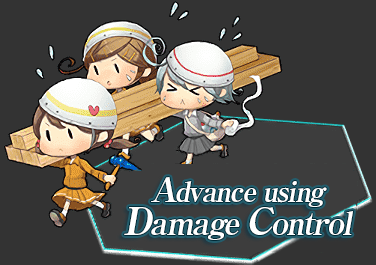
<style>
.page{position:relative;width:376px;height:265px;background:#333333}
.page>*{position:absolute;margin:0}
.t1{font:28px/30px "RyuminPro-ExBold";letter-spacing:-0.06em;color:#ffffff;font-style:italic}
.t2{font:34px/30px "RyuminPro-ExBold";letter-spacing:-0.06em;color:#ffffff;font-style:italic}
.t3{font:38px/30px "RyuminPro-ExBold";letter-spacing:-0.06em;color:#ffffff;font-style:italic}
.t4{font:32px/30px "RyuminPro-ExBold";letter-spacing:-0.06em;color:#ffffff;font-style:italic}
</style>
<div class="page">
<p class="t1" style="left:124px;top:177px;width:229px;height:63px;text-align:center"><span class="t2">A</span>dvance using<br><span class="t3">D</span><span class="t4">amage </span><span class="t3">C</span><span class="t4">ontrol</span></p>
</div>
